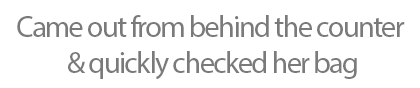
<style>
.page{position:relative;width:420px;height:88px;background:#ffffff}
.page>*{position:absolute;margin:0}
.t1{font:30px/36px "MyriadPro-Regular";letter-spacing:-0.05em;color:#7a7a7a}
</style>
<div class="page">
<p class="t1" style="left:17px;top:15px;width:388px;height:65px;text-align:center">Came out from behind the counter <br>&amp; quickly checked her bag</p>
</div>
